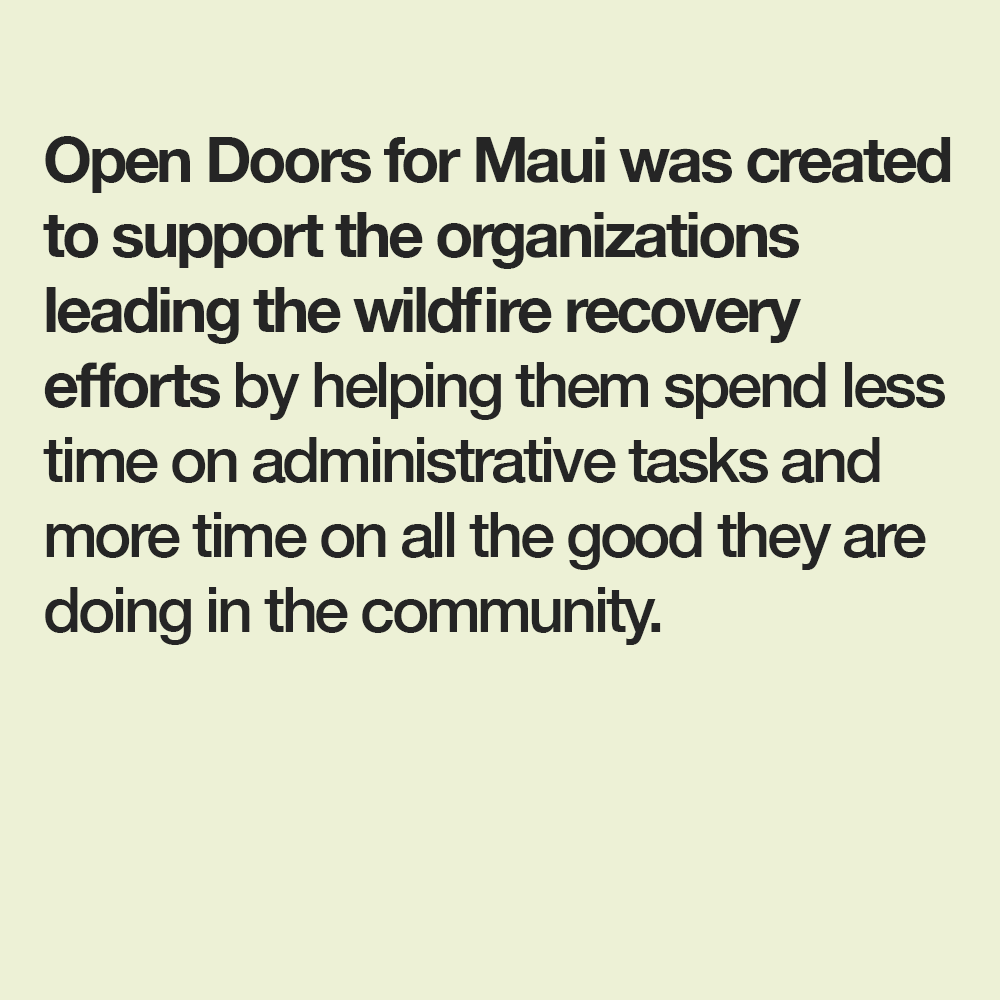
<style>
.page{position:relative;width:1000px;height:1000px;background:#edf1d6}
.page>*{position:absolute;margin:0}
.t1{font:62.5px "HelveticaNeue-Medium";letter-spacing:-0.05em;color:#252525}
.t2{font:62.5px "HelveticaNeue-Bold";letter-spacing:-0.05em;color:#252525}
</style>
<div class="page">
<p class="t1" style="left:43px;top:136px;width:908px;height:509px"><span class="t2">Open Doors for Maui was created to support the organizations leading the wildfire recovery efforts </span>by helping them spend less time on administrative tasks and more time on all the good they are doing in the community.</p>
</div>
